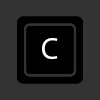
<style>
.page{position:relative;width:100px;height:100px;background:#333333}
.page>*{position:absolute;margin:0}
.t1{font:30px "MyriadPro-Regular";color:#ffffff}
</style>
<div class="page">
<p class="t1" style="left:42px;top:38px;width:16px;height:21px">C</p>
</div>
